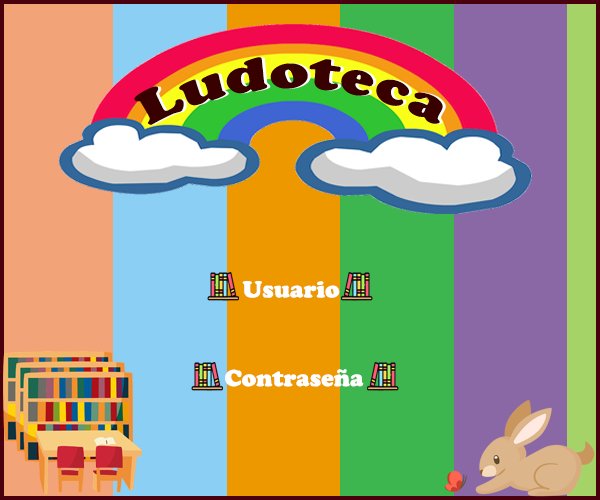
<style>
.page{position:relative;width:600px;height:500px}
.page>*{position:absolute;margin:0}
.t1{font:24px "CooperBlack";color:#ffffff}
</style>
<div class="page">
<p class="t1" style="left:242px;top:281px;width:98px;height:17px">Usuario</p>
<p class="t1" style="left:225px;top:369px;width:139px;height:18px">Contraseña</p>
</div>
